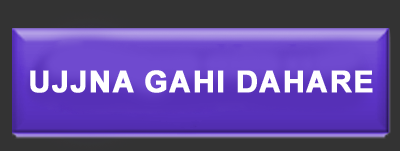
<style>
.page{position:relative;width:400px;height:151px;background:#333333}
.page>*{position:absolute;margin:0}
.t1{font:30px "Arial-BoldMT";color:#ffffff;text-transform:uppercase;font-weight:bold}
</style>
<div class="page">
<p class="t1" style="left:30px;top:70px;width:343px;height:23px">Ujjna Gahi Dahare</p>
</div>
